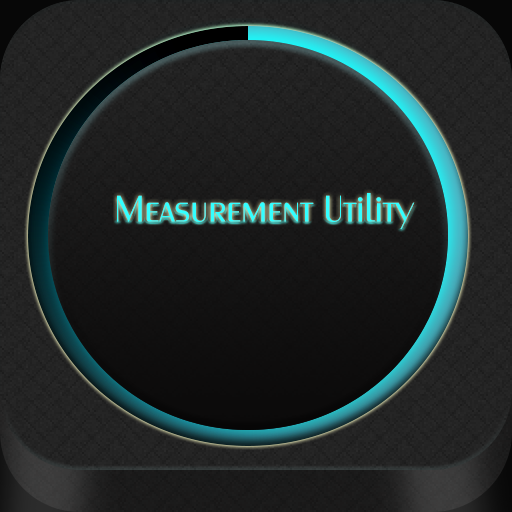
<style>
.page{position:relative;width:512px;height:512px}
.page>*{position:absolute;margin:0}
.t1{font:36px "PenultimateLight";color:#33ffff}
.t2{font:12px "MyriadPro-Regular";color:#33ffff}
</style>
<div class="page">
<p class="t1" style="left:117px;top:193px;width:298px;height:36px"><span class="t2"><br><br><br> </span>Measurement Utility</p>
<p class="t1" style="left:117px;top:193px;width:298px;height:36px"><span class="t2"><br><br><br> </span>Measurement Utility</p>
</div>
